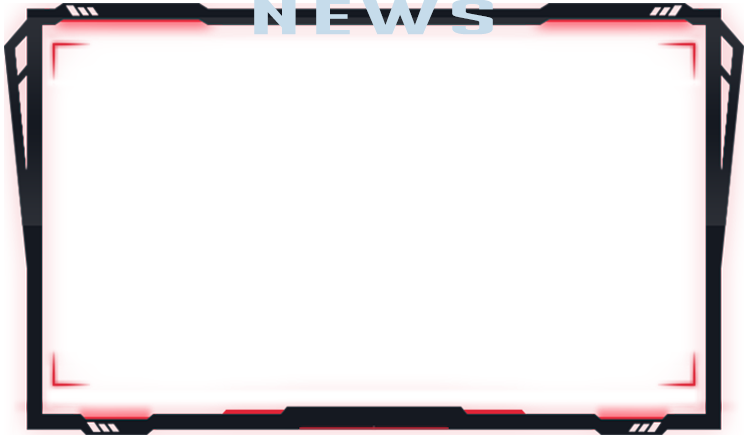
<style>
.page{position:relative;width:749px;height:435px;background:#ffffff}
.page>*{position:absolute;margin:0}
.t1{font:48px "BigNoodleTitling";letter-spacing:0.06em;color:#c6dceb;scale:2.91 1}
</style>
<div class="page">
<p class="t1" style="left:254px;top:0px;width:239px;height:35px">NEWS</p>
</div>
